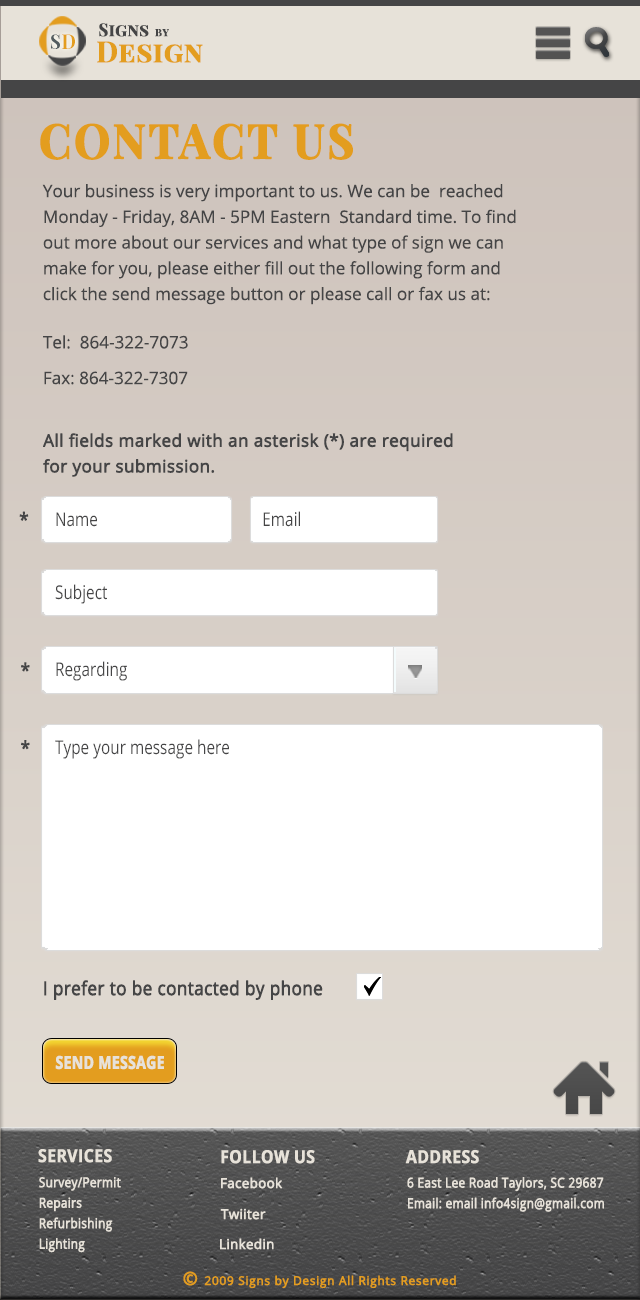
<style>
.page{position:relative;width:640px;height:1300px;background:#ffffff}
.page>*{position:absolute;margin:0}
.t1{font:17.3px "PlayfairDisplaySC-Bold";color:#454546;font-weight:bold;scale:0.96 1}
.t2{font:11.5px "PlayfairDisplaySC-Bold";color:#454546;font-weight:bold;scale:0.96 1}
.t3{font:19.2px "PlayfairDisplaySC-Bold";color:#535c5f;scale:0.96 1}
.t4{font:19.2px "PlayfairDisplaySC-Bold";color:#e39d1f;scale:0.96 1}
.t5{font:28.8px "PlayfairDisplaySC-Bold";color:#e39d1f;font-weight:bold;scale:0.96 1}
.t6{font:47.4px "PlayfairDisplaySC-Bold";letter-spacing:0.035em;color:#e39d1f;font-weight:bold;scale:0.96 1}
.t7{font:17.1px/25.7px "OpenSans";color:#454546}
.t8{font:17.1px/25.7px "OpenSans";color:#454546;font-weight:bold}
.t9{font:19px "OpenSans";color:#454546;font-weight:bold;scale:0.89 1}
.t10{font:19px "OpenSans";color:#454546;scale:0.81 1}
.t11{font:17.4px "OpenSans-Bold";color:#e7e2d9;font-weight:bold;scale:0.8 1}
.t12{font:18.1px "OpenSans-Bold";color:#e7e2d9;font-weight:bold;scale:0.87 1}
.t13{font:13.6px/20.5px "OpenSans";color:#e7e2d9;font-weight:bold;scale:0.87 1}
.t14{font:13.5px "OpenSans";color:#e7e2d9;font-weight:bold}
.t15{font:13.6px/20.6px "OpenSans";color:#e7e2d9;font-weight:bold;scale:0.87 1}
.t16{font:12px "OpenSans";letter-spacing:0.035em;color:#e39d1f;font-weight:bold}
.t17{font:18px "OpenSans";letter-spacing:0.035em;color:#e39d1f;font-weight:bold}
</style>
<div class="page">
<p class="t1" style="left:99px;top:23px;width:50px;height:14px">Signs</p>
<p class="t2" style="left:155px;top:29px;width:14px;height:8px">by</p>
<p class="t3" style="left:51px;top:34px;width:9px;height:15px">S</p>
<p class="t4" style="left:62px;top:34px;width:13px;height:15px">D</p>
<p class="t5" style="left:97px;top:41px;width:106px;height:22px">Design</p>
<p class="t6" style="left:40px;top:123px;width:313px;height:37px">CONTACT US</p>
<p class="t7" style="left:42px;top:184px;width:474px;height:201px">Your business is very important to us. We can be  reached <br>Monday - Friday, 8AM - 5PM Eastern  Standard time. To find <br>out more about our services and what type of sign we can <br>make for you, please either fill out the following form and <br>click the send message button or please call or fax us at:<br>Tel:  864-322-7073<br>Fax: 864-322-7307</p>
<p class="t8" style="left:43px;top:433px;width:410px;height:44px">All fields marked with an asterisk (*) are required <br>for your submission.</p>
<p class="t9" style="left:19px;top:511px;width:10px;height:10px">*</p>
<p class="t10" style="left:56px;top:512px;width:41px;height:15px">Name</p>
<p class="t10" style="left:263px;top:511px;width:37px;height:16px">Email</p>
<p class="t10" style="left:55px;top:584px;width:52px;height:20px">Subject</p>
<p class="t9" style="left:21px;top:662px;width:9px;height:10px">*</p>
<p class="t10" style="left:56px;top:661px;width:71px;height:20px">Regarding</p>
<p class="t9" style="left:21px;top:740px;width:9px;height:10px">*</p>
<p class="t10" style="left:55px;top:739px;width:174px;height:20px">Type your message here</p>
<p class="t9" style="left:44px;top:980px;width:279px;height:20px">I prefer to be contacted by phone</p>
<p class="t11" style="left:55px;top:1055px;width:109px;height:15px">SEND MESSAGE</p>
<p class="t12" style="left:38px;top:1149px;width:74px;height:14px">SERVICES</p>
<p class="t12" style="left:221px;top:1150px;width:94px;height:14px">FOLLOW US</p>
<p class="t12" style="left:405px;top:1150px;width:74px;height:14px">ADDRESS</p>
<p class="t13" style="left:39px;top:1177px;width:82px;height:76px">Survey/Permit    <br>Repairs      <br>Refurbishing      <br>Lighting</p>
<p class="t14" style="left:221px;top:1177px;width:62px;height:12px">Facebook</p>
<p class="t15" style="left:407px;top:1177px;width:197px;height:35px">6 East Lee Road Taylors, SC 29687<br>Email: email info4sign@gmail.com</p>
<p class="t14" style="left:220px;top:1208px;width:46px;height:12px">Twiiter</p>
<p class="t14" style="left:220px;top:1238px;width:54px;height:12px">Linkedin</p>
<p class="t16" style="left:183px;top:1271px;width:273px;height:18px"><span class="t17">© </span>2009 Signs by Design All Rights Reserved</p>
</div>
